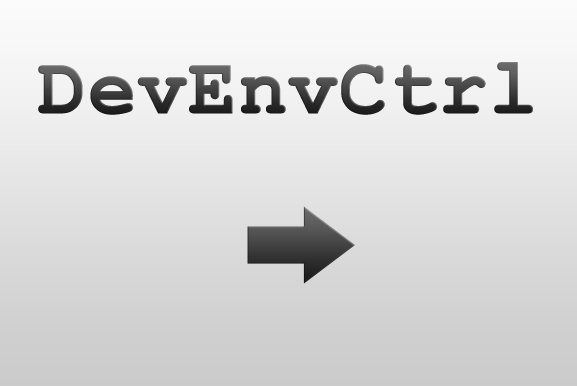
<style>
.page{position:relative;width:577px;height:386px}
.page>*{position:absolute;margin:0}
.t1{font:80px "CourierNewPS-BoldMT";font-weight:bold}
</style>
<div class="page">
<p class="t1" style="left:38px;top:62px;width:495px;height:53px">DevEnvCtrl</p>
</div>
